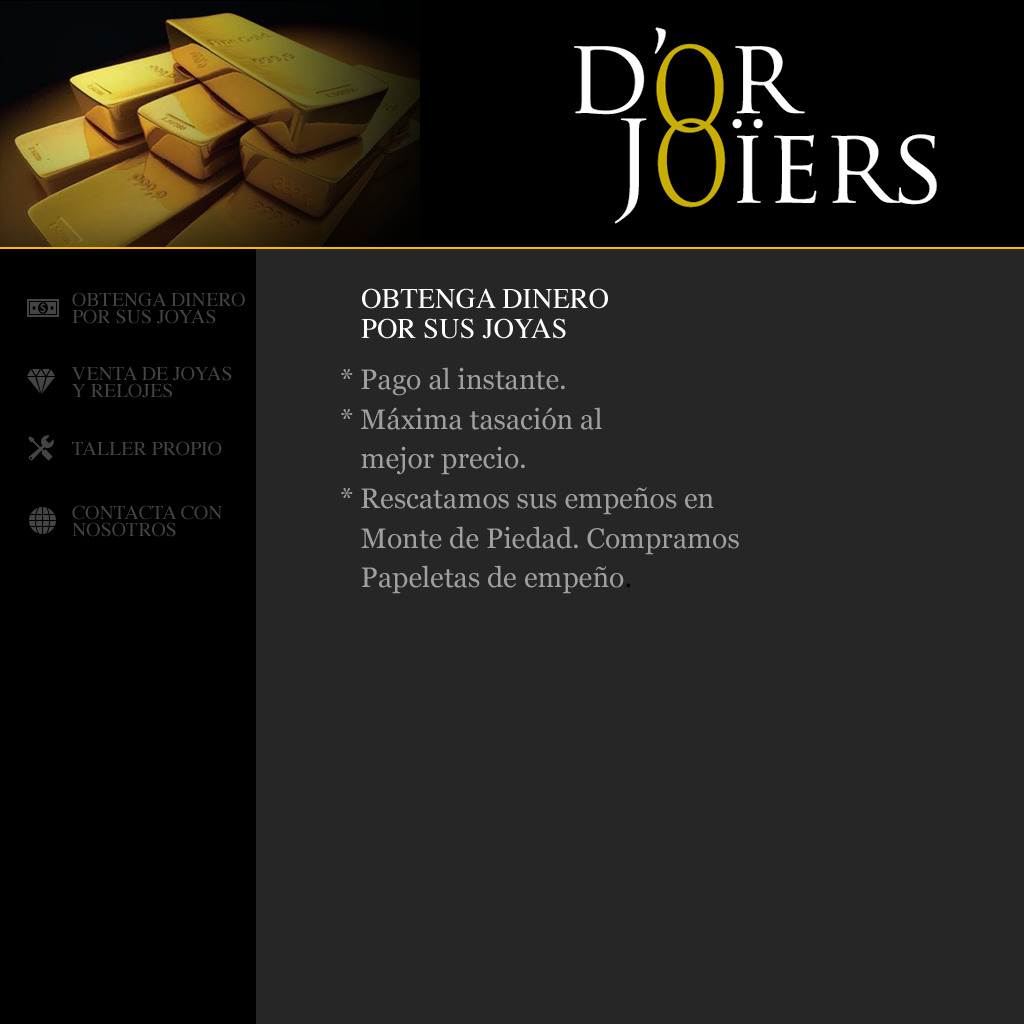
<style>
.page{position:relative;width:1024px;height:1024px;background:#262626}
.page>*{position:absolute;margin:0}
.t1{font:19.8px/17px "Times-Roman";color:#444444}
.t2{font:28.3px/29.6px "Times-Roman";color:#ffffff}
.t3{font:28.3px/39.7px "Georgia";color:#9f9f9f}
.t4{font:28.3px/39.7px "Georgia";color:#000000}
.t5{font:19.8px "Times-Roman";color:#444444}
</style>
<div class="page">
<p class="t1" style="left:72px;top:292px;width:173px;height:32px">OBTENGA DINERO<br>POR SUS JOYAS</p>
<p class="t2" style="left:361px;top:288px;width:247px;height:51px">OBTENGA DINERO<br>POR SUS JOYAS</p>
<p class="t1" style="left:72px;top:366px;width:160px;height:32px">VENTA DE JOYAS<br>Y RELOJES</p>
<p class="t3" style="left:341px;top:367px;width:398px;height:227px">* Pago al instante.<br>* Máxima tasación al<br>   mejor precio. <br>* Rescatamos sus empeños en<br>   Monte de Piedad. Compramos<br>   Papeletas de empeño<span class="t4">.</span></p>
<p class="t5" style="left:72px;top:441px;width:150px;height:15px">TALLER PROPIO</p>
<p class="t1" style="left:72px;top:505px;width:150px;height:32px">CONTACTA CON<br>NOSOTROS</p>
</div>
